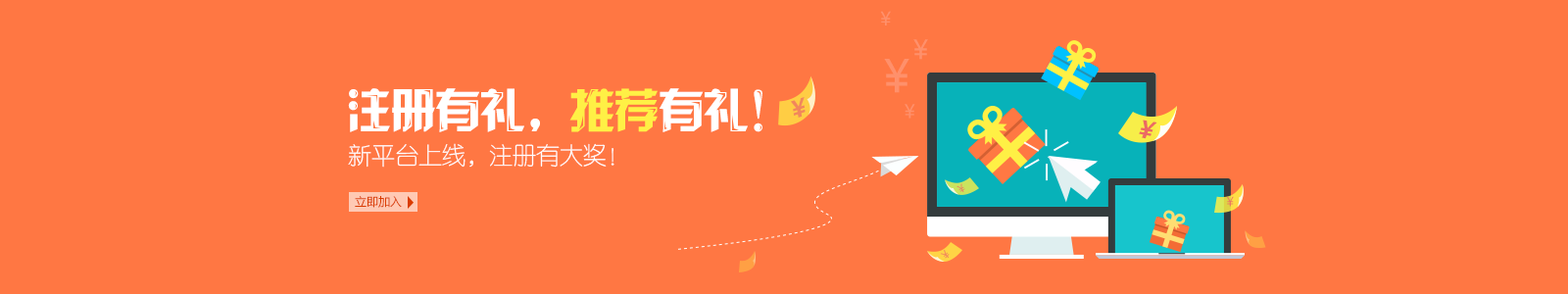
<style>
.page{position:relative;width:1568px;height:294px;background:#ff7743}
.page>*{position:absolute;margin:0}
.t1{font:18.5px "MicrosoftYaHei";color:#ff906b}
.t2{font:25.9px "MicrosoftYaHei";color:#ff906b}
.t3{font:44.4px "MicrosoftYaHei";color:#ff906b}
.t4{font:47px "JLinXin";letter-spacing:-0.05em;color:#ffffff}
.t5{font:47px "JLinXin";letter-spacing:-0.05em;color:#fff045}
.t6{font:23.5px "MicrosoftYaHei-Bold";color:#f2875b;font-style:italic}
.t7{font:23.5px "MicrosoftYaHei-Bold";color:#ec6464;font-style:italic}
.t8{font:23.5px "FZY1JW--GB1-0";color:#ffffff}
.t9{font:10.9px "MicrosoftYaHei";color:#e58563}
.t10{font:11.8px "MicrosoftYaHei";color:#da3c00}
.t11{font:12.4px "MicrosoftYaHei";color:#ec6464}
.t12{font:10.9px "MicrosoftYaHei";color:#f0835d}
</style>
<div class="page">
<p class="t1" style="left:880px;top:11px;width:11px;height:14px">￥</p>
<p class="t2" style="left:913px;top:39px;width:15px;height:21px">￥</p>
<p class="t3" style="left:884px;top:59px;width:25px;height:34px">￥</p>
<p class="t4" style="left:348px;top:88px;width:414px;height:44px">注册有礼，<span class="t5">推荐</span>有礼！</p>
<p class="t6" style="left:791px;top:97px;width:15px;height:21px;rotate:-18deg">￥</p>
<p class="t1" style="left:905px;top:104px;width:10px;height:15px">￥</p>
<p class="t7" style="left:1139px;top:120px;width:18px;height:19px;rotate:10deg;opacity:0.97">￥</p>
<p class="t8" style="left:348px;top:143px;width:266px;height:25px">新平台上线，注册有大奖！</p>
<p class="t9" style="left:956px;top:183px;width:9px;height:10px;rotate:150deg">￥</p>
<p class="t10" style="left:355px;top:196px;width:47px;height:12px">立即加入</p>
<p class="t11" style="left:1226px;top:196px;width:8px;height:11px;opacity:0.84">￥</p>
<p class="t12" style="left:940px;top:249px;width:10px;height:10px;rotate:134deg">￥</p>
</div>
